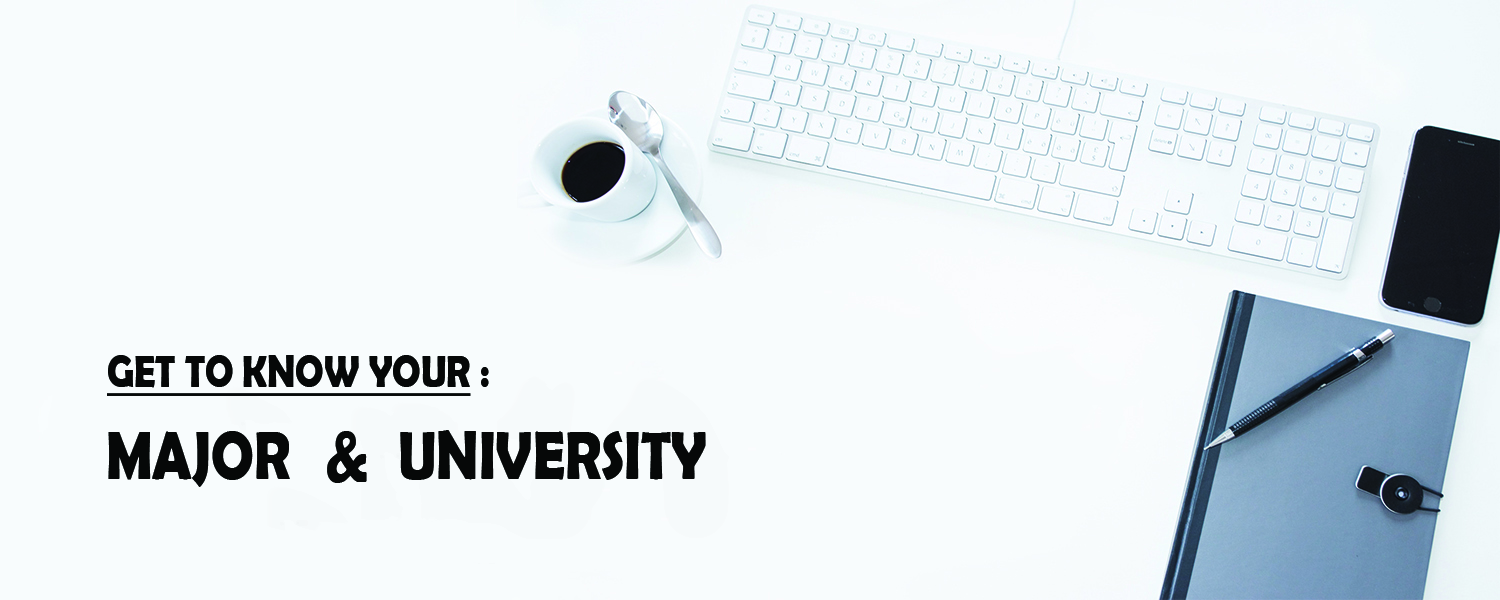
<style>
.page{position:relative;width:1500px;height:600px;background:#f8fcfd}
.page>*{position:absolute;margin:0}
.t1{font:44.7px "BerlinSansFBDemi-Bold";color:#060808;text-transform:uppercase;text-decoration:underline;scale:0.85 1}
.t2{font:44.7px "BerlinSansFBDemi-Bold";color:#060808;text-transform:uppercase;scale:0.85 1}
.t3{font:67.8px "BerlinSansFBDemi-Bold";color:#060808;text-transform:uppercase;scale:0.84 1}
.t4{font:74.6px "BerlinSansFBDemi-Bold";color:#060808;text-transform:uppercase;scale:0.84 1}
</style>
<div class="page">
<p class="t1" style="left:107px;top:355px;width:382px;height:41px"><span class="t2">  : </span>get to know your</p>
<p class="t3" style="left:108px;top:431px;width:182px;height:56px">major</p>
<p class="t4" style="left:327px;top:431px;width:40px;height:52px">&amp;</p>
<p class="t3" style="left:400px;top:430px;width:306px;height:50px">university</p>
</div>
